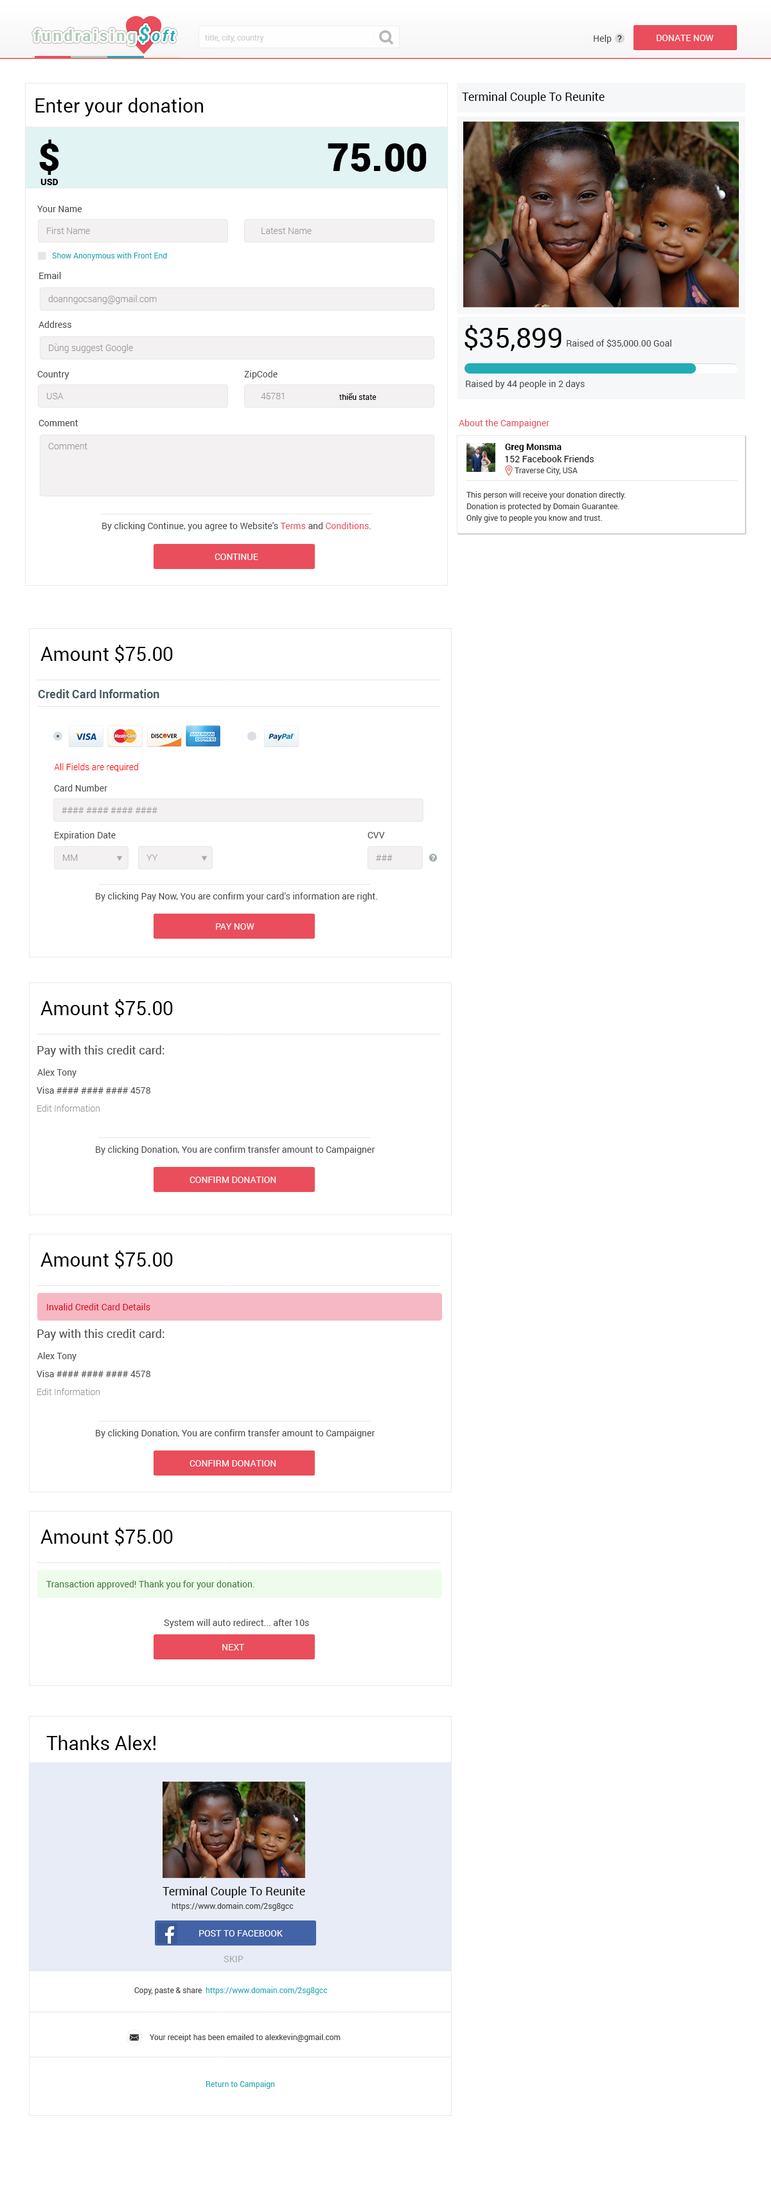
<style>
.page{position:relative;width:771px;height:2186px;background:#ffffff}
.page>*{position:absolute;margin:0}
.t1{font:15.4px "Roboto-Bold";letter-spacing:0.15em;color:#b2ccba}
.t2{font:19.3px "Roboto-BoldItalic";letter-spacing:0.15em;color:#23acb4}
.t3{font:15.4px "Roboto-BoldItalic";letter-spacing:0.15em;color:#23acb4}
.t4{font:7.7px "Roboto-Regular";color:#cccccc}
.t5{font:9px "Roboto-Regular";color:#464646}
.t6{font:9px "Roboto-Regular";color:#000000}
.t7{font:9px "Roboto-Regular";color:#ffffff;text-transform:uppercase}
.t8{font:19.3px "Roboto-Regular";color:#000000}
.t9{font:11.6px "Roboto-Regular";color:#000000}
.t10{font:38.6px "Roboto-Black";color:#000000}
.t11{font:9px "Roboto-Black";color:#000000}
.t12{font:9px "Roboto-Light";color:#9b9999}
.t13{font:7.7px "Roboto-Regular";color:#23acb4}
.t14{font:27.9px "Roboto-Regular";color:#000000}
.t15{font:7.7px "Roboto-Regular";color:#000000}
.t16{font:9px "Roboto-Regular";color:#ea4d5b}
.t17{font:9px "Roboto-Bold";color:#000000}
.t18{font:7.7px "Roboto-Regular";color:#464646}
.t19{font:7.7px/11.6px "Roboto-Regular";color:#464646}
.t20{font:11.6px "Roboto-Bold";color:#455960}
.t21{font:9px "Roboto-Light";color:#ff0000}
.t22{font:11.6px "Roboto-Regular";color:#464646}
.t23{font:9px "Roboto-Regular";color:#df0024}
.t24{font:9px "Roboto-Regular";color:#41753c}
.t25{font:9px "Roboto-Regular";color:#a7a7a7}
</style>
<div class="page">
<p class="t1" style="left:34px;top:25px;width:142px;height:19px">fundraising<span class="t2">$</span><span class="t3">oft</span></p>
<p class="t4" style="left:205px;top:34px;width:59px;height:8px">title, city, country</p>
<p class="t5" style="left:594px;top:35px;width:18px;height:9px">Help</p>
<p class="t6" style="left:618px;top:35px;width:4px;height:7px">?</p>
<p class="t7" style="left:657px;top:35px;width:57px;height:6px">Donate now</p>
<p class="t8" style="left:35px;top:98px;width:168px;height:18px">Enter your donation</p>
<p class="t9" style="left:462px;top:92px;width:143px;height:12px">Terminal Couple To Reunite</p>
<p class="t10" style="left:39px;top:140px;width:20px;height:35px">$</p>
<p class="t10" style="left:328px;top:143px;width:99px;height:29px">75.00</p>
<p class="t11" style="left:40px;top:179px;width:18px;height:6px">USD</p>
<p class="t5" style="left:37px;top:206px;width:45px;height:6px">Your Name</p>
<p class="t12" style="left:47px;top:227px;width:43px;height:7px">First Name</p>
<p class="t12" style="left:262px;top:228px;width:50px;height:6px">Latest Name</p>
<p class="t13" style="left:52px;top:252px;width:115px;height:8px">Show Anonymous with Front End</p>
<p class="t5" style="left:39px;top:272px;width:22px;height:7px">Email</p>
<p class="t12" style="left:48px;top:295px;width:109px;height:9px">doanngocsang@gmail.com</p>
<p class="t5" style="left:39px;top:321px;width:32px;height:7px">Address</p>
<p class="t14" style="left:465px;top:325px;width:97px;height:26px">$35,899</p>
<p class="t5" style="left:567px;top:339px;width:105px;height:9px">Raised of $35,000.00 Goal</p>
<p class="t12" style="left:49px;top:343px;width:84px;height:10px">Dùng suggest Google</p>
<p class="t5" style="left:37px;top:371px;width:32px;height:8px">Country</p>
<p class="t5" style="left:244px;top:370px;width:34px;height:9px">ZipCode</p>
<p class="t5" style="left:466px;top:380px;width:119px;height:9px">Raised by 44 people in 2 days</p>
<p class="t12" style="left:47px;top:393px;width:17px;height:6px">USA</p>
<p class="t12" style="left:261px;top:393px;width:23px;height:6px">45781</p>
<p class="t15" style="left:339px;top:393px;width:38px;height:7px">thiếu state</p>
<p class="t5" style="left:39px;top:420px;width:39px;height:6px">Comment</p>
<p class="t16" style="left:459px;top:419px;width:91px;height:9px">About the Campaigner</p>
<p class="t12" style="left:48px;top:443px;width:39px;height:6px">Comment</p>
<p class="t17" style="left:505px;top:444px;width:57px;height:8px">Greg Monsma</p>
<p class="t6" style="left:505px;top:455px;width:89px;height:7px">152 Facebook Friends</p>
<p class="t18" style="left:515px;top:467px;width:63px;height:8px">Traverse City, USA</p>
<p class="t19" style="left:467px;top:491px;width:159px;height:32px">This person will receive your donation directly.<br>Donation is protected by Domain Guarantee.<br>Only give to people you know and trust.</p>
<p class="t5" style="left:102px;top:522px;width:269px;height:9px">By clicking Continue, you agree to Website's <span class="t16">Terms </span>and <span class="t16">Conditions</span>.</p>
<p class="t7" style="left:215px;top:554px;width:43px;height:6px">Continue</p>
<p class="t8" style="left:40px;top:645px;width:133px;height:18px">Amount $75.00</p>
<p class="t20" style="left:38px;top:689px;width:121px;height:9px">Credit Card Information</p>
<p class="t21" style="left:54px;top:763px;width:84px;height:9px">All Fields are required</p>
<p class="t5" style="left:54px;top:784px;width:53px;height:7px">Card Number</p>
<p class="t12" style="left:62px;top:807px;width:96px;height:6px">#### #### #### ####</p>
<p class="t5" style="left:55px;top:831px;width:61px;height:9px">Expiration Date</p>
<p class="t5" style="left:368px;top:832px;width:17px;height:6px">CVV</p>
<p class="t12" style="left:63px;top:854px;width:15px;height:7px">MM</p>
<p class="t12" style="left:147px;top:854px;width:11px;height:7px">YY</p>
<p class="t12" style="left:376px;top:854px;width:17px;height:7px">###</p>
<p class="t5" style="left:96px;top:892px;width:282px;height:9px">By clicking Pay Now, You are confirm your card’s information are right.</p>
<p class="t7" style="left:216px;top:923px;width:39px;height:7px">Pay Now</p>
<p class="t8" style="left:40px;top:999px;width:133px;height:18px">Amount $75.00</p>
<p class="t22" style="left:37px;top:1045px;width:128px;height:12px">Pay with this credit card:</p>
<p class="t5" style="left:37px;top:1068px;width:39px;height:9px">Alex Tony</p>
<p class="t5" style="left:37px;top:1086px;width:113px;height:8px">Visa #### #### #### 4578</p>
<p class="t12" style="left:37px;top:1104px;width:63px;height:8px">Edit Information</p>
<p class="t5" style="left:96px;top:1146px;width:279px;height:9px">By clicking Donation, You are confirm transfer amount to Campaigner</p>
<p class="t7" style="left:190px;top:1176px;width:86px;height:7px">confirm donation</p>
<p class="t8" style="left:40px;top:1250px;width:133px;height:18px">Amount $75.00</p>
<p class="t23" style="left:47px;top:1303px;width:103px;height:7px">Invalid Credit Card Details</p>
<p class="t22" style="left:37px;top:1329px;width:128px;height:11px">Pay with this credit card:</p>
<p class="t5" style="left:37px;top:1352px;width:39px;height:9px">Alex Tony</p>
<p class="t5" style="left:37px;top:1370px;width:113px;height:7px">Visa #### #### #### 4578</p>
<p class="t12" style="left:37px;top:1388px;width:63px;height:7px">Edit Information</p>
<p class="t5" style="left:96px;top:1429px;width:279px;height:9px">By clicking Donation, You are confirm transfer amount to Campaigner</p>
<p class="t7" style="left:190px;top:1460px;width:86px;height:6px">confirm donation</p>
<p class="t8" style="left:40px;top:1527px;width:133px;height:18px">Amount $75.00</p>
<p class="t24" style="left:46px;top:1580px;width:209px;height:9px">Transaction approved! Thank you for your donation.</p>
<p class="t5" style="left:164px;top:1619px;width:145px;height:9px">System will auto redirect... after 10s</p>
<p class="t7" style="left:222px;top:1644px;width:23px;height:6px">next</p>
<p class="t8" style="left:46px;top:1735px;width:110px;height:15px">Thanks Alex!</p>
<p class="t9" style="left:163px;top:1886px;width:142px;height:12px">Terminal Couple To Reunite</p>
<p class="t18" style="left:172px;top:1902px;width:122px;height:9px">https://www.domain.com/2sg8gcc</p>
<p class="t7" style="left:199px;top:1930px;width:84px;height:6px">Post to Facebook</p>
<p class="t25" style="left:224px;top:1956px;width:20px;height:6px">SKIP</p>
<p class="t18" style="left:134px;top:1987px;width:68px;height:8px">Copy, paste &amp; share</p>
<p class="t13" style="left:206px;top:1986px;width:122px;height:9px">https://www.domain.com/2sg8gcc</p>
<p class="t18" style="left:150px;top:2033px;width:191px;height:9px">Your receipt has been emailed to alexkevin@gmail.com</p>
<p class="t13" style="left:206px;top:2080px;width:69px;height:9px">Return to Campaign</p>
</div>
